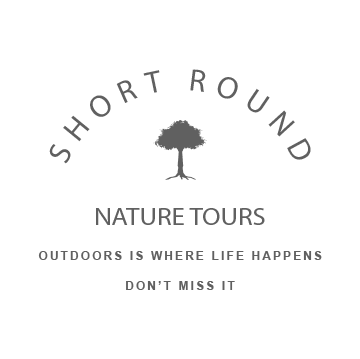
<style>
.page{position:relative;width:360px;height:359px;background:#ffffff}
.page>*{position:absolute;margin:0}
.t1{font:31.3px "MyriadPro-Regular";letter-spacing:0.3em;color:#606060;text-transform:uppercase}
.t2{font:24.4px "MyriadPro-Regular";color:#606060;scale:1.11 1}
.t3{font:11.6px "Arial-BoldMT";letter-spacing:0.2em;color:#606060;text-transform:uppercase}
</style>
<div class="page">
<p class="t1" style="left:49px;top:69px;width:262px;height:95px;text-align:center">Short round</p>
<p class="t2" style="left:96px;top:208px;width:169px;height:17px">NATURE TOURS</p>
<p class="t3" style="left:38px;top:251px;width:284px;height:9px">Outdoors is where life happens</p>
<p class="t3" style="left:126px;top:281px;width:109px;height:9px">Don’t miss it</p>
</div>
